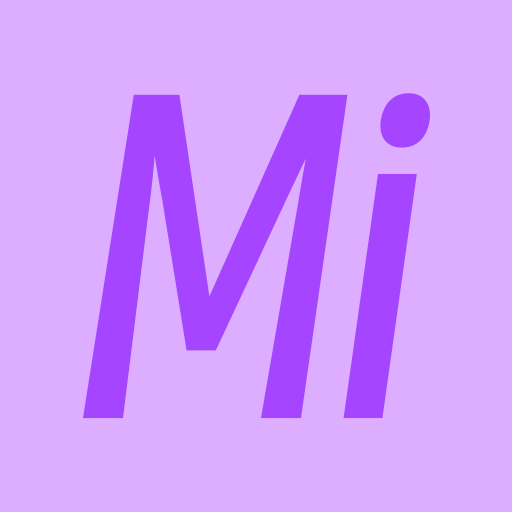
<style>
.page{position:relative;width:512px;height:512px;background:#ddadff}
.page>*{position:absolute;margin:0}
.t1{font:400px "SmileySans-Oblique";color:#a545ff}
</style>
<div class="page">
<p class="t1" style="left:83px;top:93px;width:347px;height:326px">Mi</p>
</div>
